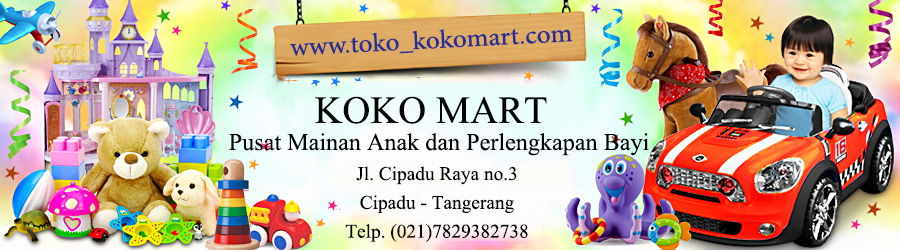
<style>
.page{position:relative;width:900px;height:250px}
.page>*{position:absolute;margin:0}
.t1{font:36.1px "AdobeArabic-Regular";color:#272f94}
.t2{font:48px "Aparajita";color:#020202}
.t3{font:30px "Aparajita";color:#020202}
.t4{font:24px "Aparajita";color:#020202}
</style>
<div class="page">
<p class="t1" style="left:290px;top:29px;width:283px;height:27px;rotate:-3deg">www.toko_kokomart.com</p>
<p class="t2" style="left:315px;top:96px;width:232px;height:28px">KOKO MART</p>
<p class="t3" style="left:229px;top:133px;width:420px;height:23px">Pusat Mainan Anak dan Perlengkapan Bayi</p>
<p class="t4" style="left:345px;top:166px;width:183px;height:76px;text-align:center">Jl. Cipadu Raya no.3<br>Cipadu - Tangerang<br>Telp. (021)7829382738</p>
</div>
